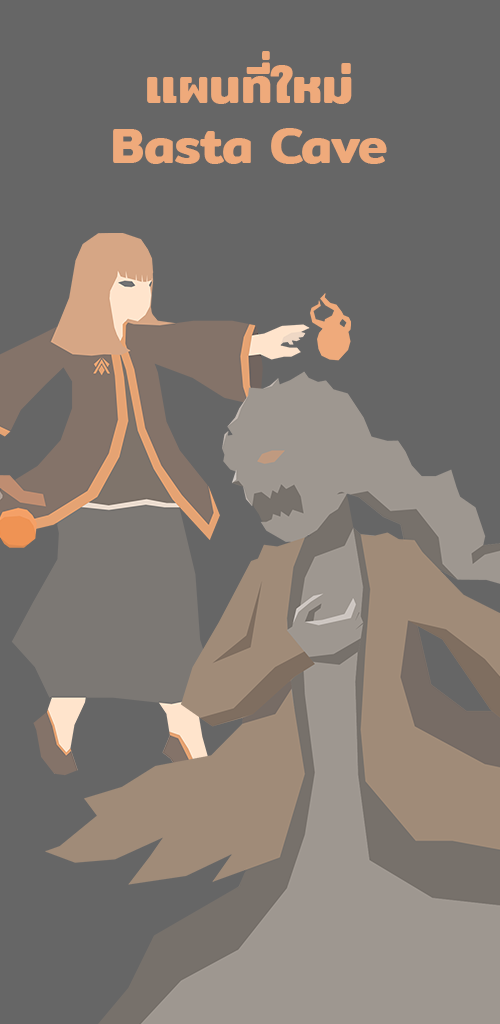
<style>
.page{position:relative;width:500px;height:1024px;background:#666666}
.page>*{position:absolute;margin:0}
.t1{font:50px "Mitr-SemiBold";color:#efaa7b}
</style>
<div class="page">
<p class="t1" style="left:113px;top:51px;width:274px;height:113px;text-align:center">เเผนที่ใหม่<br>Basta Cave</p>
</div>
